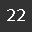
<style>
.page{position:relative;width:32px;height:32px;background:#333333}
.page>*{position:absolute;margin:0}
.t1{font:17.8px "MyriadPro-Regular";color:#ffffff;scale:1.12 1}
</style>
<div class="page">
<p class="t1" style="left:7px;top:9px;width:18px;height:12px">22</p>
</div>
